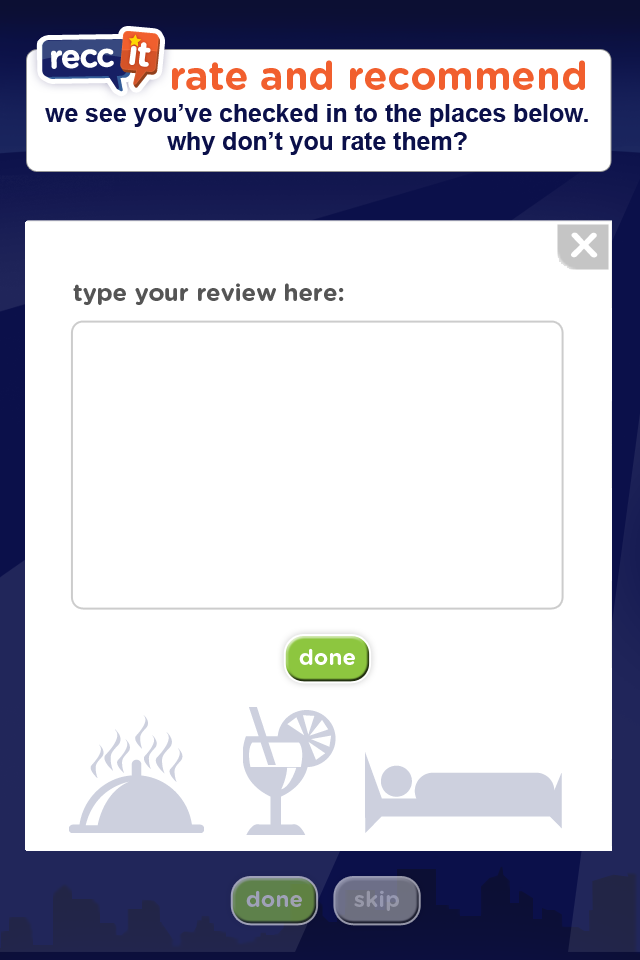
<style>
.page{position:relative;width:640px;height:960px;background:#ffffff}
.page>*{position:absolute;margin:0}
.t1{font:39.7px "GothamRounded-Bold";color:#f15f2e}
.t2{font:24.8px/28px "Arial-BoldMT";color:#0b104a}
.t3{font:34.6px "GothamRounded-Bold";color:#ffffff;scale:1.23 1}
.t4{font:24px "GothamRounded-Bold";color:#555555}
.t5{font:22.2px "GothamRounded-Bold";color:#ffffff}
.t6{font:22.2px "GothamRounded-Bold";color:#9fa1b8}
.t7{font:22.2px "GothamRounded-Bold";color:#9697a8}
</style>
<div class="page">
<p class="t1" style="left:172px;top:60px;width:413px;height:30px">rate and recommend</p>
<p class="t2" style="left:45px;top:104px;width:543px;height:51px;text-align:center">we see you’ve checked in to the places below.<br>why don’t you rate them?</p>
<p class="t3" style="left:571px;top:232px;width:27px;height:26px">X</p>
<p class="t4" style="left:73px;top:283px;width:271px;height:22px">type your review here:</p>
<p class="t5" style="left:299px;top:648px;width:56px;height:17px">done</p>
<p class="t6" style="left:246px;top:890px;width:56px;height:17px">done</p>
<p class="t7" style="left:354px;top:890px;width:45px;height:21px">skip</p>
</div>
